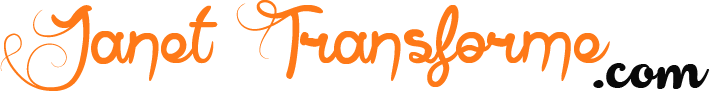
<style>
.page{position:relative;width:725px;height:91px;background:#ffffff}
.page>*{position:absolute;margin:0}
.t1{font:103px "AnneExilum";color:#fe7918}
.t2{font:48px "Armonioso";color:#090909}
</style>
<div class="page">
<p class="t1" style="left:0px;top:0px;width:610px;height:91px">Janet Transforme</p>
<p class="t2" style="left:593px;top:63px;width:117px;height:26px">.com</p>
</div>
